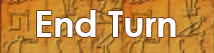
<style>
.page{position:relative;width:214px;height:53px}
.page>*{position:absolute;margin:0}
.t1{font:36px "CenturyGothic-Bold";color:#ffffff}
</style>
<div class="page">
<p class="t1" style="left:37px;top:10px;width:139px;height:27px">End Turn</p>
</div>
